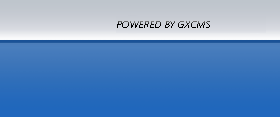
<style>
.page{position:relative;width:280px;height:117px}
.page>*{position:absolute;margin:0}
.t1{font:10px "LeelawadeeUI-Semilight";text-transform:uppercase;font-style:italic}
</style>
<div class="page">
<p class="t1" style="left:117px;top:21px;width:93px;height:7px">powered By gxcms</p>
</div>
